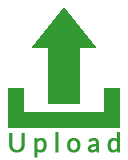
<style>
.page{position:relative;width:128px;height:160px;background:#ffffff}
.page>*{position:absolute;margin:0}
.t1{font:26px "Lato-Regular";letter-spacing:0.22em;color:#339933;font-weight:bold}
</style>
<div class="page">
<p class="t1" style="left:9px;top:132px;width:111px;height:26px">Upload</p>
</div>
